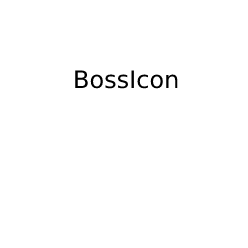
<style>
.page{position:relative;width:248px;height:248px;background:#ffffff}
.page>*{position:absolute;margin:0}
.t1{font:24px "DejaVuSans";color:#000000}
</style>
<div class="page">
<p class="t1" style="left:75px;top:70px;width:103px;height:19px">BossIcon</p>
</div>
